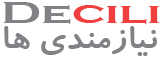
<style>
.page{position:relative;width:160px;height:60px;background:#ffffff}
.page>*{position:absolute;margin:0}
.t1{font:32px "CopperplateGothic-Bold";color:#ef3f3e;scale:1.5 1}
.t2{font:32px "CopperplateGothic-Bold";color:#818285;scale:1.5 1}
.t3{font:36px "BKoodakBold";color:#818285;scale:1.12 1}
</style>
<div class="page">
<p class="t1" style="left:3px;top:2px;width:156px;height:22px"><span class="t2">De</span>cili</p>
<p class="t3" style="left:4px;top:26px;width:153px;height:30px">نيازمندي ها</p>
</div>
